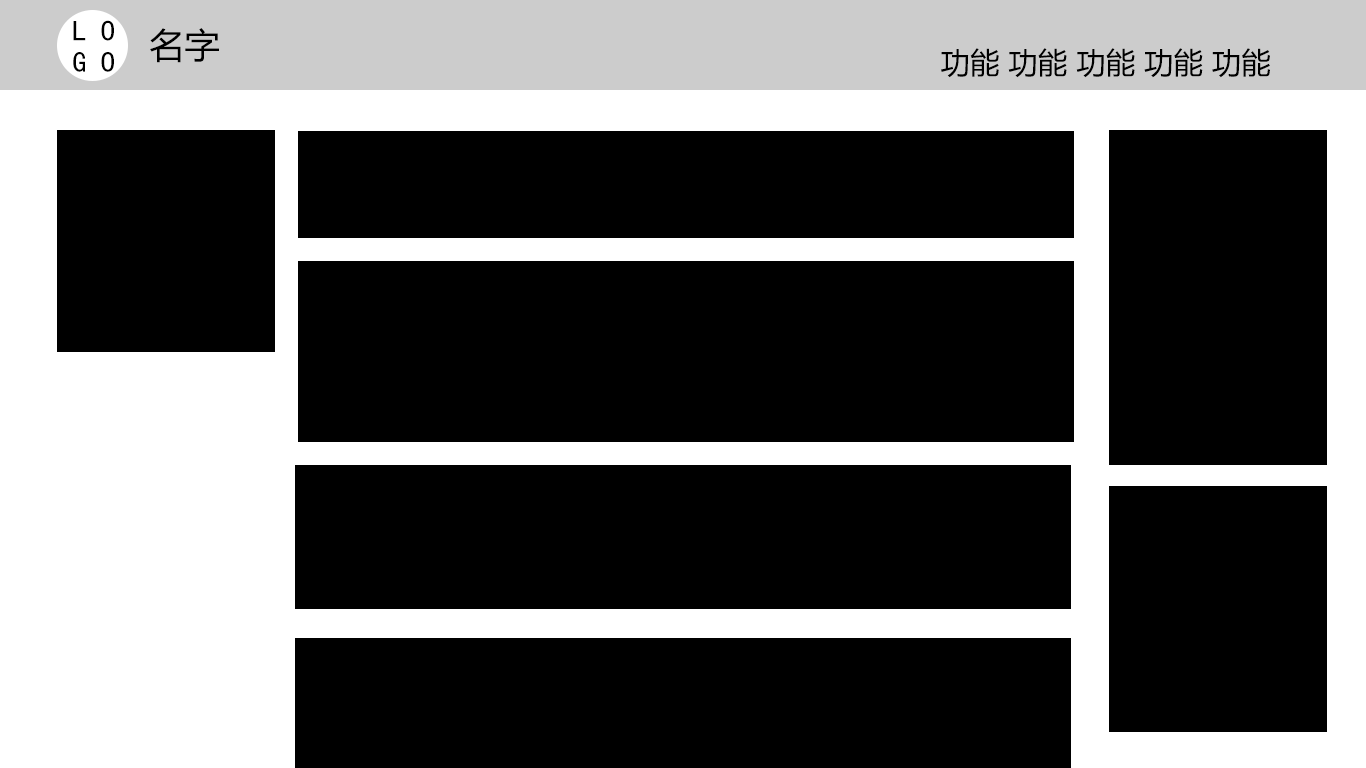
<style>
.page{position:relative;width:1366px;height:768px;background:#000000}
.page>*{position:absolute;margin:0}
.t1{font:28.7px "KaiTi";color:#000000}
.t2{font:35px "MicrosoftYaHei";color:#000000}
.t3{font:29.5px "MicrosoftYaHei";color:#000000}
</style>
<div class="page">
<p class="t1" style="left:73px;top:20px;width:41px;height:52px">L O<br>G O</p>
<p class="t2" style="left:150px;top:28px;width:69px;height:35px">名字</p>
<p class="t3" style="left:941px;top:48px;width:329px;height:30px">功能 功能 功能 功能 功能</p>
</div>
